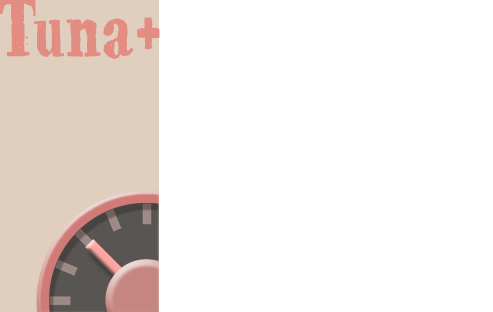
<style>
.page{position:relative;width:493px;height:312px;background:#ffffff}
.page>*{position:absolute;margin:0}
.t1{font:69px "HVDBodedo-Medium";color:#e28c82;scale:0.69 1}
</style>
<div class="page">
<p class="t1" style="left:0px;top:0px;width:160px;height:59px">Tuna+</p>
</div>
